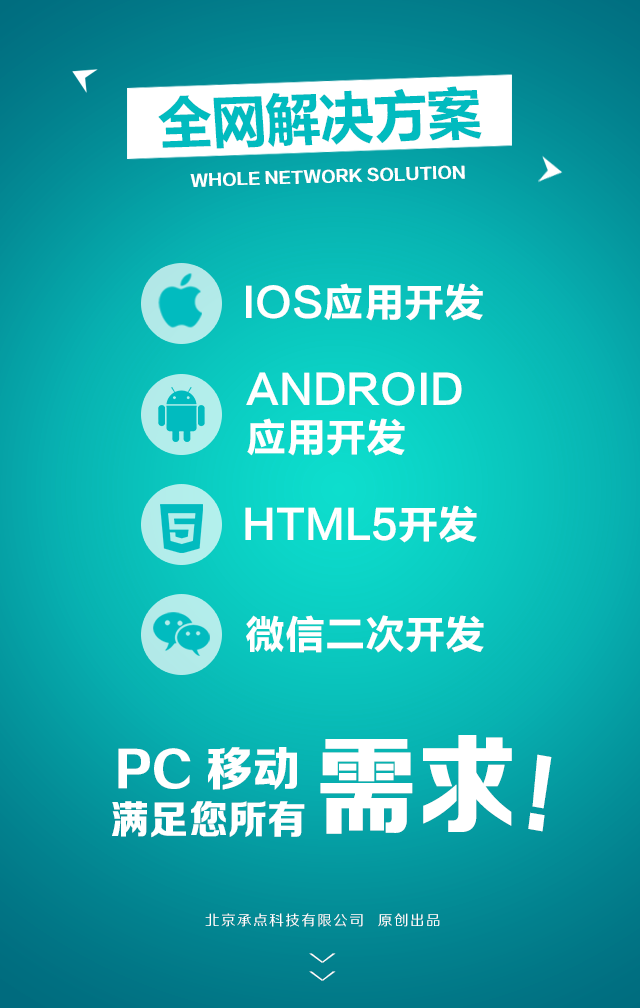
<style>
.page{position:relative;width:640px;height:1008px}
.page>*{position:absolute;margin:0}
.t1{font:58.6px "FZLTCHK--GBK1-0";letter-spacing:-0.05em;color:#01bbbf;text-transform:uppercase;scale:0.97 1}
.t2{font:15.6px "FZZDHJW--GB1-0";letter-spacing:0.005em;color:#ffffff;text-transform:uppercase}
.t3{font:40px "FZLTCHK--GBK1-0";color:#ffffff;text-transform:uppercase}
.t4{font:40px/48px "FZLTCHK--GBK1-0";color:#ffffff;text-transform:uppercase}
.t5{font:108.8px "FZZDHJW--GB1-0";letter-spacing:0.005em;color:#ffffff;text-transform:uppercase;scale:0.92 1}
.t6{font:47.1px "FZZDHJW--GB1-0";letter-spacing:0.005em;color:#ffffff;text-transform:uppercase}
.t7{font:88.6px "FZZDHJW--GB1-0";letter-spacing:0.005em;color:#ffffff;text-transform:uppercase;scale:0.85 1}
.t8{font:39.5px "FZZDHJW--GB1-0";letter-spacing:0.005em;color:#ffffff;text-transform:uppercase}
.t9{font:14.2px "FZZHJW--GB1-0";letter-spacing:0.1em;color:#ffffff;text-transform:uppercase}
.t10{font:36.8px "FZZXHJW--GB1-0";letter-spacing:0.5em;color:#ffffff;text-transform:uppercase;scale:0.44 1}
</style>
<div class="page">
<p class="t1" style="left:158px;top:86px;width:324px;height:63px;rotate:-2deg">全网解决方案</p>
<p class="t2" style="left:190px;top:165px;width:275px;height:22px;rotate:-2deg">Whole network solution</p>
<p class="t3" style="left:246px;top:283px;width:237px;height:38px">IOS应用开发</p>
<p class="t4" style="left:246px;top:372px;width:216px;height:84px">Android<br>应用开发</p>
<p class="t3" style="left:245px;top:505px;width:232px;height:38px">HTML5开发</p>
<p class="t3" style="left:246px;top:615px;width:238px;height:38px">微信二次开发</p>
<p class="t5" style="left:320px;top:735px;width:192px;height:99px">需求</p>
<p class="t6" style="left:118px;top:747px;width:179px;height:43px">PC 移动</p>
<p class="t7" style="left:528px;top:754px;width:24px;height:78px;rotate:10deg">!</p>
<p class="t8" style="left:112px;top:801px;width:193px;height:37px">满足您所有</p>
<p class="t9" style="left:205px;top:913px;width:235px;height:14px">北京承点科技有限公司  原创出品</p>
<p class="t10" style="left:309px;top:953px;width:27px;height:28px;rotate:90deg">&gt;&gt;</p>
</div>
